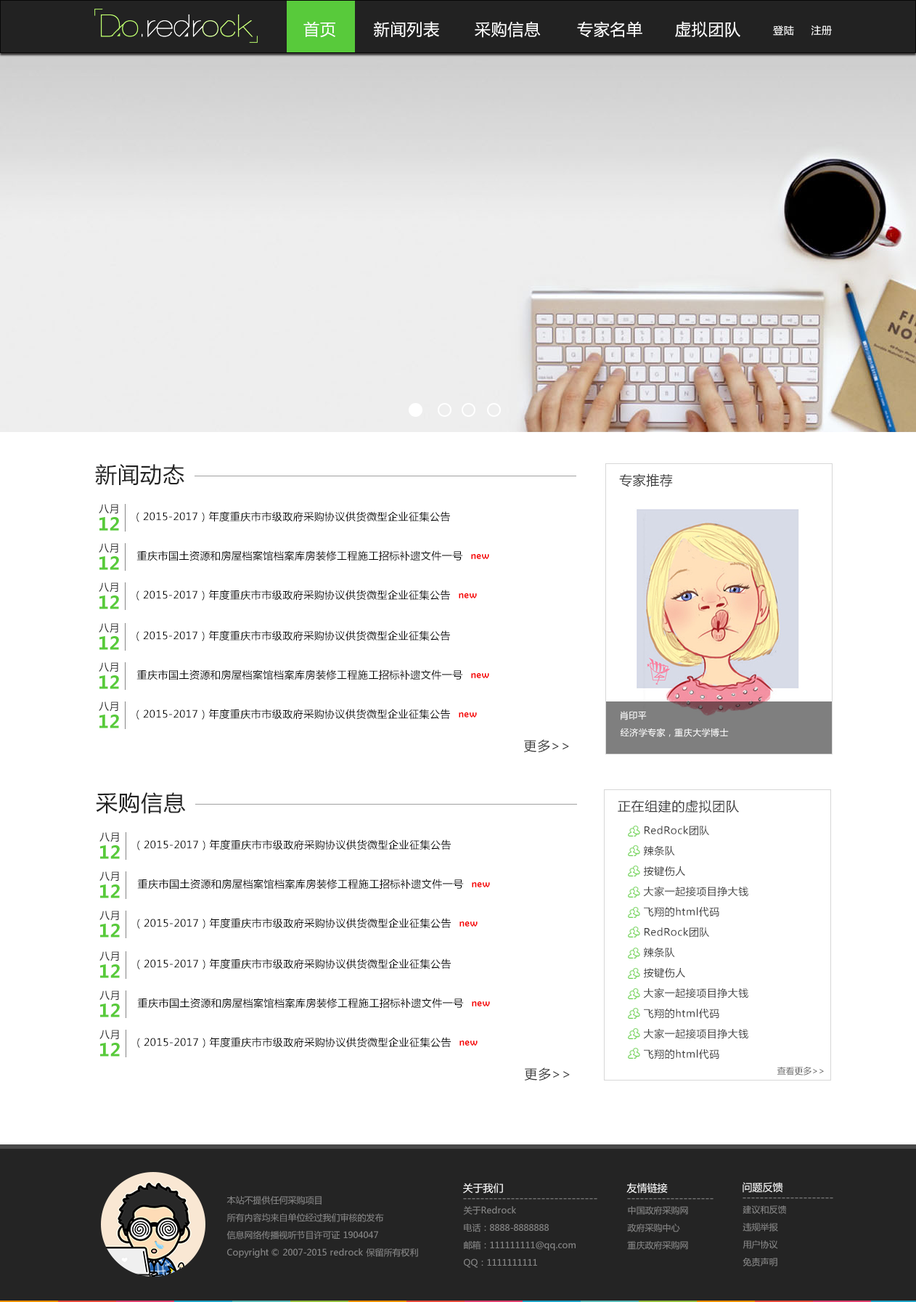
<style>
.page{position:relative;width:916px;height:1302px;background:#ffffff}
.page>*{position:absolute;margin:0}
.t1{font:16px "MicrosoftYaHei";letter-spacing:0.035em;color:#ffffff}
.t2{font:10.2px "MicrosoftYaHei";letter-spacing:0.035em;color:#ffffff}
.t3{font:21.8px "MicrosoftYaHei";letter-spacing:0.035em;color:#222222}
.t4{font:13.1px "MicrosoftYaHei";letter-spacing:0.035em;color:#3c3c3c}
.t5{font:10.2px "MicrosoftYaHei";letter-spacing:0.035em;color:#2c2c2c}
.t6{font:17.4px "MicrosoftYaHei-Bold";letter-spacing:0.035em;color:#58ca3b}
.t7{font:10.2px "MicrosoftYaHei";letter-spacing:0.035em;color:#000000}
.t8{font:10.2px "BerlinSansFB-Reg";letter-spacing:0.035em;color:#f40000}
.t9{font:8.7px "MicrosoftYaHei";letter-spacing:0.035em;color:#ffffff}
.t10{font:10.2px/10.2px "MicrosoftYaHei";letter-spacing:0.035em;color:#3c3c3c}
.t11{font:8.7px "MicrosoftYaHei";color:#606060}
.t12{font:10.2px "MicrosoftYaHei";color:#ffffff}
.t13{font:8.7px/17.4px "MicrosoftYaHei";color:#858585}
.t14{font:10.2px "MicrosoftYaHei";color:#858585}
</style>
<div class="page">
<p class="t1" style="left:303px;top:21px;width:32px;height:17px">首页</p>
<p class="t1" style="left:374px;top:21px;width:65px;height:17px">新闻列表</p>
<p class="t1" style="left:475px;top:21px;width:66px;height:17px">采购信息</p>
<p class="t1" style="left:577px;top:21px;width:65px;height:17px">专家名单</p>
<p class="t1" style="left:675px;top:21px;width:65px;height:17px">虚拟团队</p>
<p class="t2" style="left:773px;top:25px;width:59px;height:11px">登陆     注册</p>
<p class="t3" style="left:95px;top:464px;width:89px;height:22px">新闻动态</p>
<p class="t4" style="left:619px;top:473px;width:54px;height:14px">专家推荐</p>
<p class="t5" style="left:99px;top:504px;width:19px;height:10px">八月</p>
<p class="t6" style="left:99px;top:517px;width:20px;height:14px">12</p>
<p class="t7" style="left:136px;top:511px;width:314px;height:11px">（2015-2017）年度重庆市市级政府采购协议供货微型企业征集公告</p>
<p class="t5" style="left:99px;top:543px;width:19px;height:10px">八月</p>
<p class="t6" style="left:99px;top:556px;width:20px;height:14px">12</p>
<p class="t7" style="left:136px;top:550px;width:327px;height:11px">重庆市国土资源和房屋档案馆档案库房装修工程施工招标补遗文件一号</p>
<p class="t8" style="left:471px;top:554px;width:18px;height:5px">new</p>
<p class="t5" style="left:99px;top:582px;width:19px;height:10px">八月</p>
<p class="t7" style="left:136px;top:589px;width:314px;height:11px">（2015-2017）年度重庆市市级政府采购协议供货微型企业征集公告</p>
<p class="t8" style="left:459px;top:593px;width:18px;height:5px">new</p>
<p class="t6" style="left:99px;top:595px;width:20px;height:14px">12</p>
<p class="t5" style="left:99px;top:623px;width:19px;height:10px">八月</p>
<p class="t6" style="left:99px;top:636px;width:20px;height:14px">12</p>
<p class="t7" style="left:136px;top:630px;width:314px;height:11px">（2015-2017）年度重庆市市级政府采购协议供货微型企业征集公告</p>
<p class="t5" style="left:99px;top:662px;width:19px;height:10px">八月</p>
<p class="t6" style="left:99px;top:675px;width:20px;height:14px">12</p>
<p class="t7" style="left:136px;top:669px;width:327px;height:11px">重庆市国土资源和房屋档案馆档案库房装修工程施工招标补遗文件一号</p>
<p class="t8" style="left:471px;top:673px;width:18px;height:5px">new</p>
<p class="t5" style="left:99px;top:701px;width:19px;height:10px">八月</p>
<p class="t7" style="left:136px;top:709px;width:314px;height:10px">（2015-2017）年度重庆市市级政府采购协议供货微型企业征集公告</p>
<p class="t8" style="left:459px;top:712px;width:18px;height:5px">new</p>
<p class="t9" style="left:621px;top:711px;width:26px;height:9px">肖印平</p>
<p class="t6" style="left:99px;top:714px;width:20px;height:14px">12</p>
<p class="t9" style="left:621px;top:727px;width:108px;height:10px">经济学专家，重庆大学博士</p>
<p class="t4" style="left:523px;top:739px;width:46px;height:13px">更多&gt;&gt;</p>
<p class="t3" style="left:96px;top:792px;width:90px;height:22px">采购信息</p>
<p class="t4" style="left:618px;top:799px;width:121px;height:14px">正在组建的虚拟团队</p>
<p class="t5" style="left:99px;top:832px;width:20px;height:10px">八月</p>
<p class="t10" style="left:643px;top:825px;width:105px;height:234px">RedRock团队<br><br>辣条队<br><br>按键伤人<br><br>大家一起接项目挣大钱<br><br>飞翔的html代码<br><br>RedRock团队<br><br>辣条队<br><br>按键伤人<br><br>大家一起接项目挣大钱<br><br>飞翔的html代码<br><br>大家一起接项目挣大钱<br><br>飞翔的html代码</p>
<p class="t6" style="left:100px;top:845px;width:20px;height:14px">12</p>
<p class="t7" style="left:137px;top:839px;width:314px;height:11px">（2015-2017）年度重庆市市级政府采购协议供货微型企业征集公告</p>
<p class="t5" style="left:99px;top:871px;width:20px;height:10px">八月</p>
<p class="t7" style="left:137px;top:878px;width:327px;height:11px">重庆市国土资源和房屋档案馆档案库房装修工程施工招标补遗文件一号</p>
<p class="t6" style="left:100px;top:884px;width:20px;height:14px">12</p>
<p class="t8" style="left:472px;top:882px;width:18px;height:5px">new</p>
<p class="t5" style="left:99px;top:910px;width:20px;height:10px">八月</p>
<p class="t7" style="left:137px;top:918px;width:314px;height:10px">（2015-2017）年度重庆市市级政府采购协议供货微型企业征集公告</p>
<p class="t6" style="left:100px;top:923px;width:20px;height:14px">12</p>
<p class="t8" style="left:460px;top:921px;width:18px;height:5px">new</p>
<p class="t5" style="left:99px;top:951px;width:20px;height:10px">八月</p>
<p class="t6" style="left:100px;top:964px;width:20px;height:14px">12</p>
<p class="t7" style="left:137px;top:958px;width:314px;height:11px">（2015-2017）年度重庆市市级政府采购协议供货微型企业征集公告</p>
<p class="t5" style="left:99px;top:990px;width:20px;height:10px">八月</p>
<p class="t7" style="left:137px;top:997px;width:327px;height:11px">重庆市国土资源和房屋档案馆档案库房装修工程施工招标补遗文件一号</p>
<p class="t8" style="left:472px;top:1001px;width:18px;height:5px">new</p>
<p class="t6" style="left:100px;top:1003px;width:20px;height:14px">12</p>
<p class="t5" style="left:99px;top:1029px;width:20px;height:11px">八月</p>
<p class="t7" style="left:137px;top:1037px;width:314px;height:11px">（2015-2017）年度重庆市市级政府采购协议供货微型企业征集公告</p>
<p class="t6" style="left:100px;top:1042px;width:20px;height:14px">12</p>
<p class="t8" style="left:460px;top:1040px;width:18px;height:5px">new</p>
<p class="t4" style="left:524px;top:1067px;width:46px;height:13px">更多&gt;&gt;</p>
<p class="t11" style="left:777px;top:1066px;width:47px;height:9px">查看更多&gt;&gt;</p>
<p class="t12" style="left:743px;top:1182px;width:40px;height:10px">问题反馈</p>
<p class="t12" style="left:463px;top:1183px;width:40px;height:10px">关于我们</p>
<p class="t12" style="left:626px;top:1183px;width:42px;height:10px">友情链接</p>
<p class="t13" style="left:226px;top:1196px;width:192px;height:61px">本站不提供任何采购项目<br>所有内容均来自单位经过我们审核的发布<br>信息网络传播视听节目许可证 1904047<br>Copyright © 2007-2015 redrock 保留所有权利</p>
<p class="t14" style="left:463px;top:1198px;width:134px;height:1px">-------------------------------</p>
<p class="t13" style="left:463px;top:1206px;width:113px;height:61px">关于Redrock<br>电话：8888-8888888<br>邮箱：111111111@qq.com<br>QQ：1111111111</p>
<p class="t14" style="left:627px;top:1198px;width:87px;height:1px">--------------------</p>
<p class="t13" style="left:627px;top:1206px;width:61px;height:43px">中国政府采购网<br>政府采购中心<br>重庆政府采购网</p>
<p class="t14" style="left:743px;top:1197px;width:90px;height:2px">---------------------</p>
<p class="t13" style="left:743px;top:1205px;width:44px;height:61px">建议和反馈<br>违规举报<br>用户协议<br>免责声明</p>
</div>
